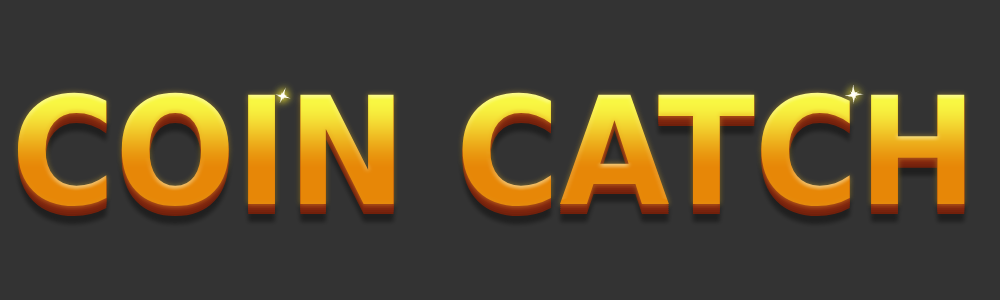
<style>
.page{position:relative;width:1000px;height:300px;background:#333333}
.page>*{position:absolute;margin:0}
.t1{font:150px "Gilam-BlackDEMO";letter-spacing:-0.005em;scale:0.95 1}
</style>
<div class="page">
<p class="t1" style="left:17px;top:92px;width:948px;height:114px">COIN CATCH</p>
</div>
